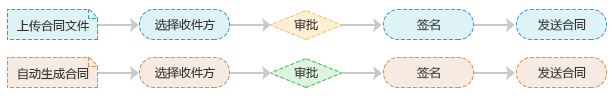
<style>
.page{position:relative;width:612px;height:98px;background:#ffffff}
.page>*{position:absolute;margin:0}
.t1{font:12px "MicrosoftYaHei";color:#333333}
</style>
<div class="page">
<p class="t1" style="left:17px;top:19px;width:72px;height:13px">上传合同文件</p>
<p class="t1" style="left:155px;top:18px;width:60px;height:13px">选择收件方</p>
<p class="t1" style="left:294px;top:18px;width:24px;height:13px">审批</p>
<p class="t1" style="left:417px;top:19px;width:23px;height:12px">签名</p>
<p class="t1" style="left:538px;top:18px;width:48px;height:13px">发送合同</p>
<p class="t1" style="left:18px;top:67px;width:71px;height:13px">自动生成合同</p>
<p class="t1" style="left:155px;top:66px;width:60px;height:13px">选择收件方</p>
<p class="t1" style="left:294px;top:66px;width:24px;height:13px">审批</p>
<p class="t1" style="left:417px;top:67px;width:23px;height:12px">签名</p>
<p class="t1" style="left:538px;top:66px;width:48px;height:13px">发送合同</p>
</div>
